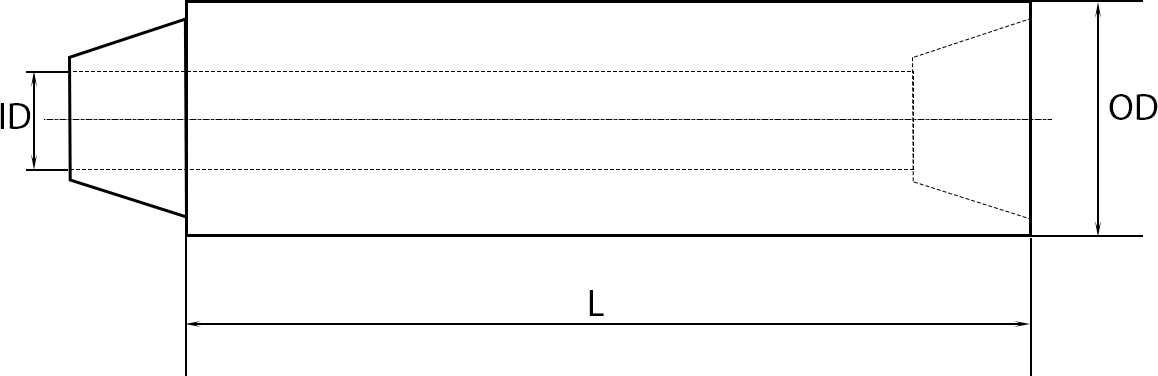
<style>
.page{position:relative;width:1158px;height:376px;background:#ffffff}
.page>*{position:absolute;margin:0}
.t1{font:37.5px "MyriadPro-Regular";color:#000000}
</style>
<div class="page">
<p class="t1" style="left:1109px;top:94px;width:49px;height:26px">OD</p>
<p class="t1" style="left:0px;top:103px;width:31px;height:26px">ID</p>
<p class="t1" style="left:589px;top:290px;width:15px;height:26px">L</p>
</div>
